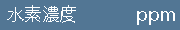
<style>
.page{position:relative;width:180px;height:30px;background:#527694}
.page>*{position:absolute;margin:0}
.t1{font:18px "HiraMaruPro-W4";color:#feffff}
</style>
<div class="page">
<p class="t1" style="left:7px;top:5px;width:168px;height:20px">水素濃度          ppm</p>
</div>
